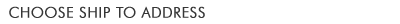
<style>
.page{position:relative;width:400px;height:24px;background:#ffffff}
.page>*{position:absolute;margin:0}
.t1{font:14.7px "FuturaBT-Light";letter-spacing:0.025em;color:#363636;text-transform:uppercase;font-weight:bold}
</style>
<div class="page">
<p class="t1" style="left:9px;top:6px;width:196px;height:12px">CHOOSE SHIP TO ADDRESS</p>
</div>
